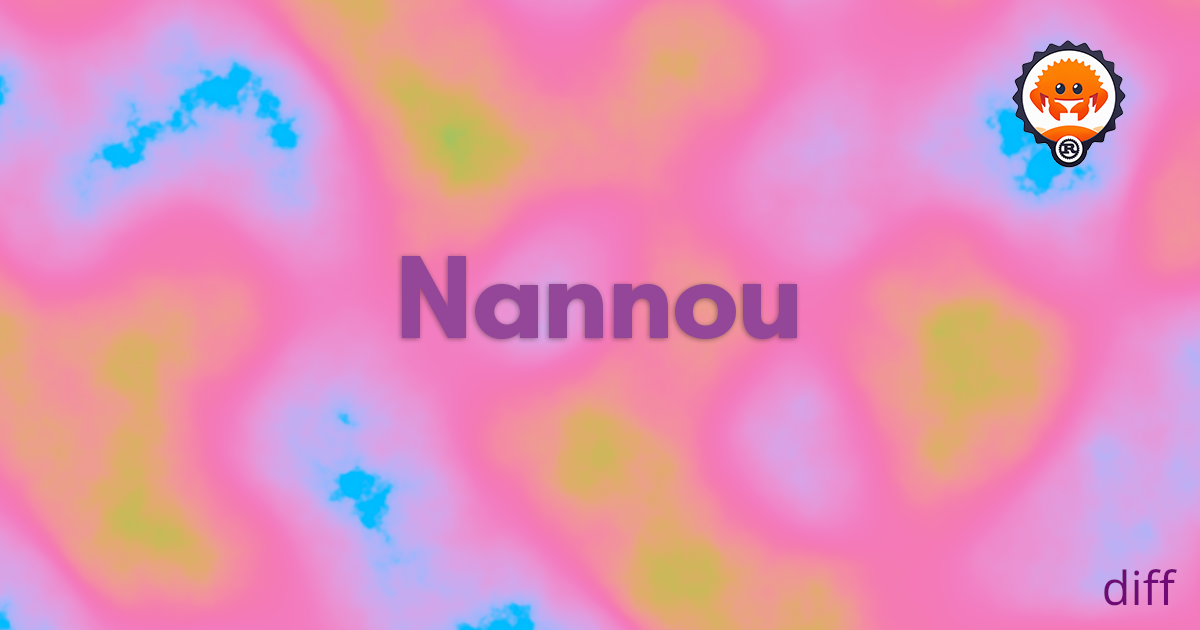
<style>
.page{position:relative;width:1200px;height:630px}
.page>*{position:absolute;margin:0}
.t1{font:120px "GlacialIndifference-Bold";letter-spacing:-0.02em;color:#944799}
</style>
<div class="page">
<p class="t1" style="left:402px;top:256px;width:395px;height:84px">Nannou</p>
</div>
